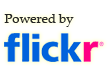
<style>
.page{position:relative;width:108px;height:72px;background:#ffffff}
.page>*{position:absolute;margin:0}
.t1{font:13px "PalatinoLinotype-Roman";color:#262626}
</style>
<div class="page">
<p class="t1" style="left:4px;top:14px;width:70px;height:13px">Powered by</p>
</div>
